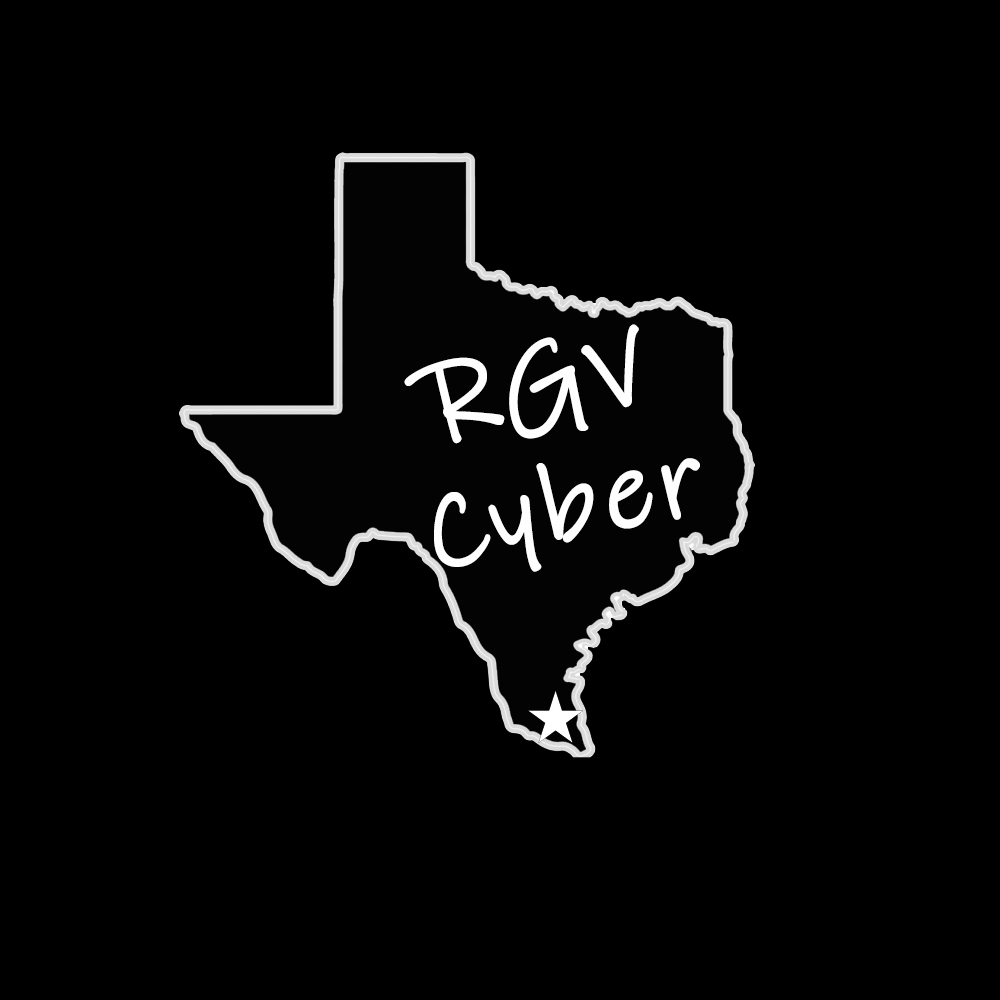
<style>
.page{position:relative;width:1000px;height:1000px;background:#000000}
.page>*{position:absolute;margin:0}
.t1{font:108.3px/125px "InkFree";letter-spacing:0.04em;color:#fefefe;font-weight:bold}
</style>
<div class="page">
<p class="t1" style="left:404px;top:324px;width:296px;height:248px;text-align:center;rotate:-12deg">RGV<br>Cyber</p>
</div>
